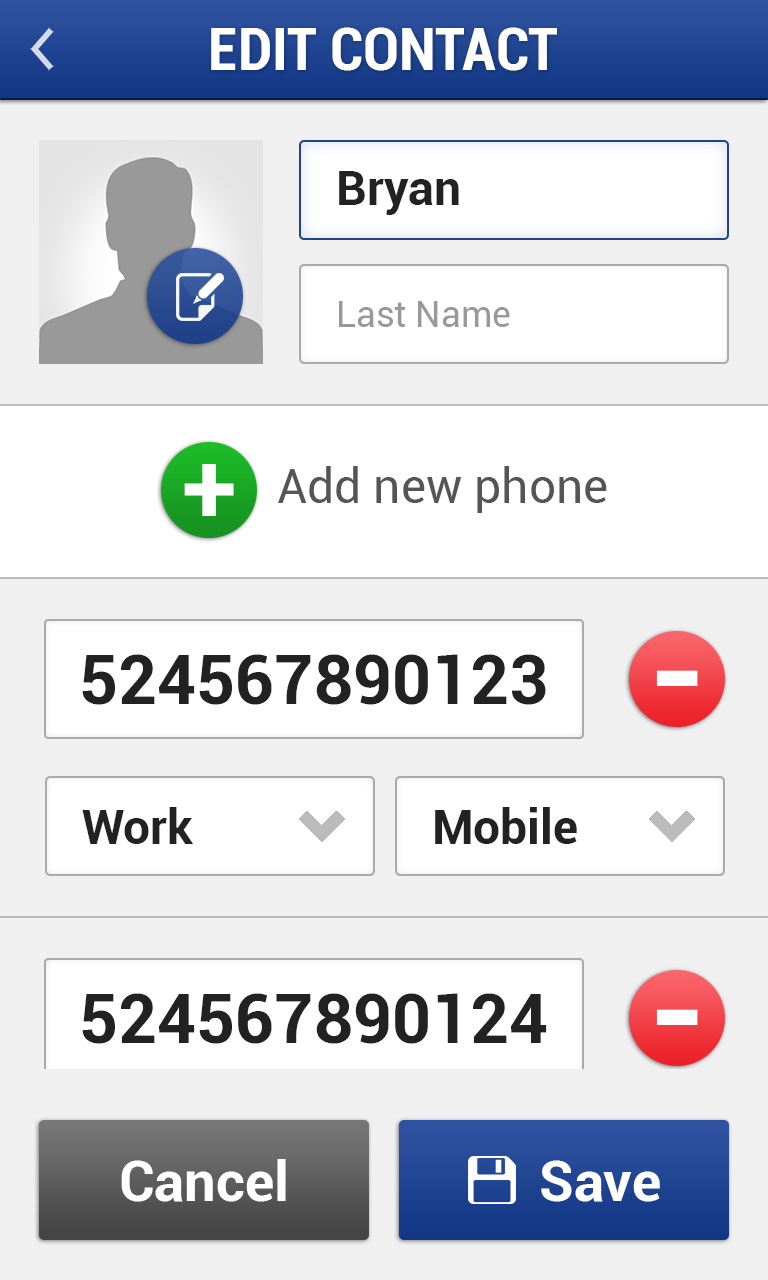
<style>
.page{position:relative;width:768px;height:1280px;background:#f0f0f0}
.page>*{position:absolute;margin:0}
.t1{font:60px "Roboto-BoldCondensed";color:#ffffff}
.t2{font:48px "Roboto-Bold";color:#222222}
.t3{font:36px "Roboto-Regular";color:#999999}
.t4{font:100px "Roboto-Bold";color:#ffffff}
.t5{font:48px "Roboto-Regular";color:#555555}
.t6{font:68px "Roboto-Bold";color:#222222}
.t7{font:140px "Roboto-Bold";color:#ffffff}
.t8{font:56px "Roboto-Bold";color:#ffffff}
</style>
<div class="page">
<p class="t1" style="left:211px;top:27px;width:346px;height:44px">EDIT CONTACT</p>
<p class="t2" style="left:339px;top:171px;width:120px;height:44px">Bryan</p>
<p class="t3" style="left:339px;top:301px;width:171px;height:26px">Last Name</p>
<p class="t4" style="left:184px;top:464px;width:50px;height:52px">+</p>
<p class="t5" style="left:278px;top:466px;width:329px;height:47px">Add new phone</p>
<p class="t6" style="left:82px;top:654px;width:464px;height:51px">524567890123</p>
<p class="t7" style="left:656px;top:670px;width:42px;height:16px">-</p>
<p class="t2" style="left:82px;top:807px;width:111px;height:37px">Work</p>
<p class="t2" style="left:435px;top:807px;width:142px;height:37px">Mobile</p>
<p class="t6" style="left:82px;top:993px;width:465px;height:51px">524567890124</p>
<p class="t7" style="left:656px;top:1009px;width:42px;height:16px">-</p>
<p class="t8" style="left:121px;top:1159px;width:165px;height:43px">Cancel</p>
<p class="t8" style="left:541px;top:1160px;width:119px;height:42px">Save</p>
</div>
